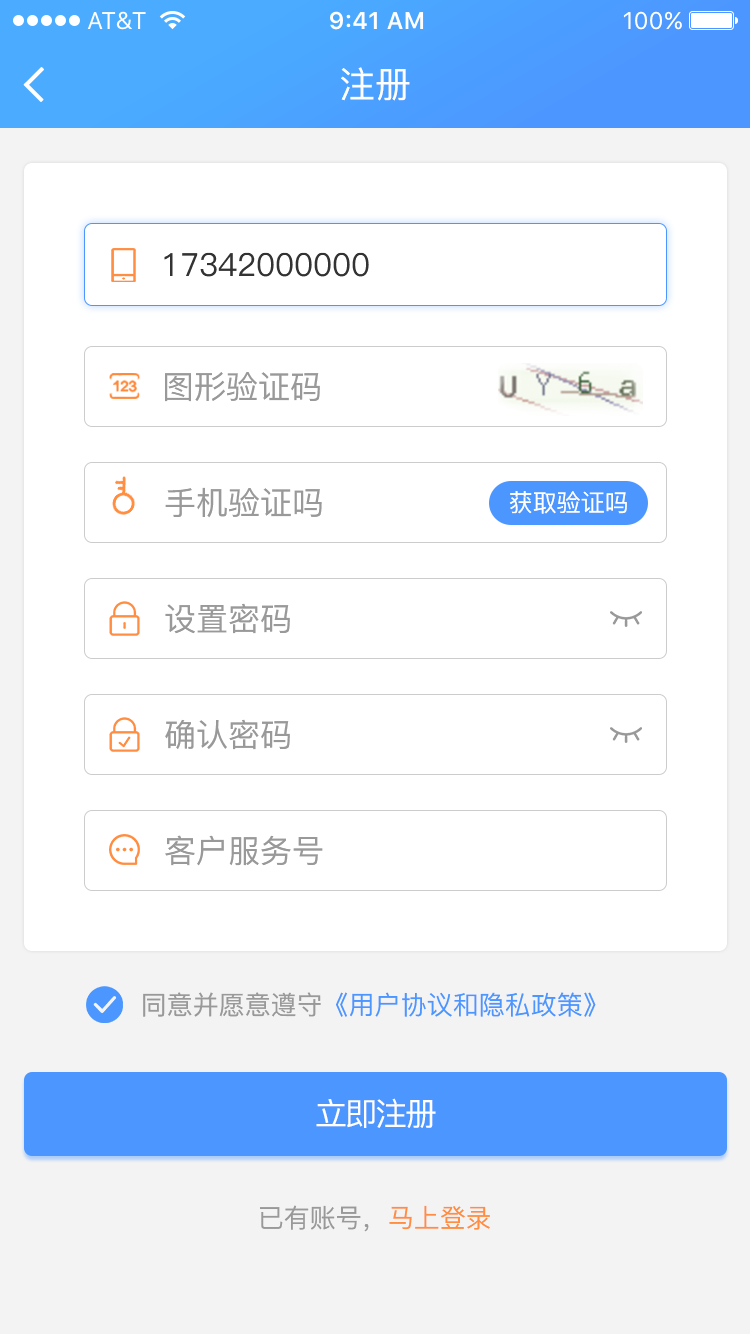
<style>
.page{position:relative;width:750px;height:1334px;background:#ffffff}
.page>*{position:absolute;margin:0}
.t1{font:36px "PingFang-SC-Medium";color:#ffffff}
.t2{font:32px "PingFang-SC-Medium";color:#333333}
.t3{font:32px "PingFang-SC-Medium";color:#999999}
.t4{font:24px "PingFang-SC-Medium";color:#ffffff}
.t5{font:26px "PingFang-SC-Medium";color:#4c97ff}
.t6{font:26px "PingFang-SC-Medium";color:#999999}
.t7{font:32px "PingFang-SC-Medium";letter-spacing:-0.06em;color:#ffffff}
.t8{font:26px "PingFang-SC-Medium";color:#ff8e42}
</style>
<div class="page">
<p class="t1" style="left:341px;top:67px;width:69px;height:34px">注册</p>
<p class="t2" style="left:164px;top:252px;width:205px;height:25px">17342000000</p>
<p class="t3" style="left:165px;top:372px;width:155px;height:30px">图形验证码</p>
<p class="t3" style="left:165px;top:487px;width:157px;height:31px">手机验证吗</p>
<p class="t4" style="left:509px;top:491px;width:118px;height:23px">获取验证吗</p>
<p class="t3" style="left:165px;top:603px;width:125px;height:31px">设置密码</p>
<p class="t3" style="left:165px;top:719px;width:125px;height:31px">确认密码</p>
<p class="t3" style="left:165px;top:835px;width:158px;height:31px">客户服务号</p>
<p class="t5" style="left:143px;top:992px;width:453px;height:25px"><span class="t6">同意并愿意遵守</span>《用户协议和隐私政策》</p>
<p class="t7" style="left:316px;top:1098px;width:120px;height:30px">立即注册</p>
<p class="t6" style="left:260px;top:1205px;width:230px;height:27px">已有账号，<span class="t8">马上登录</span></p>
</div>
